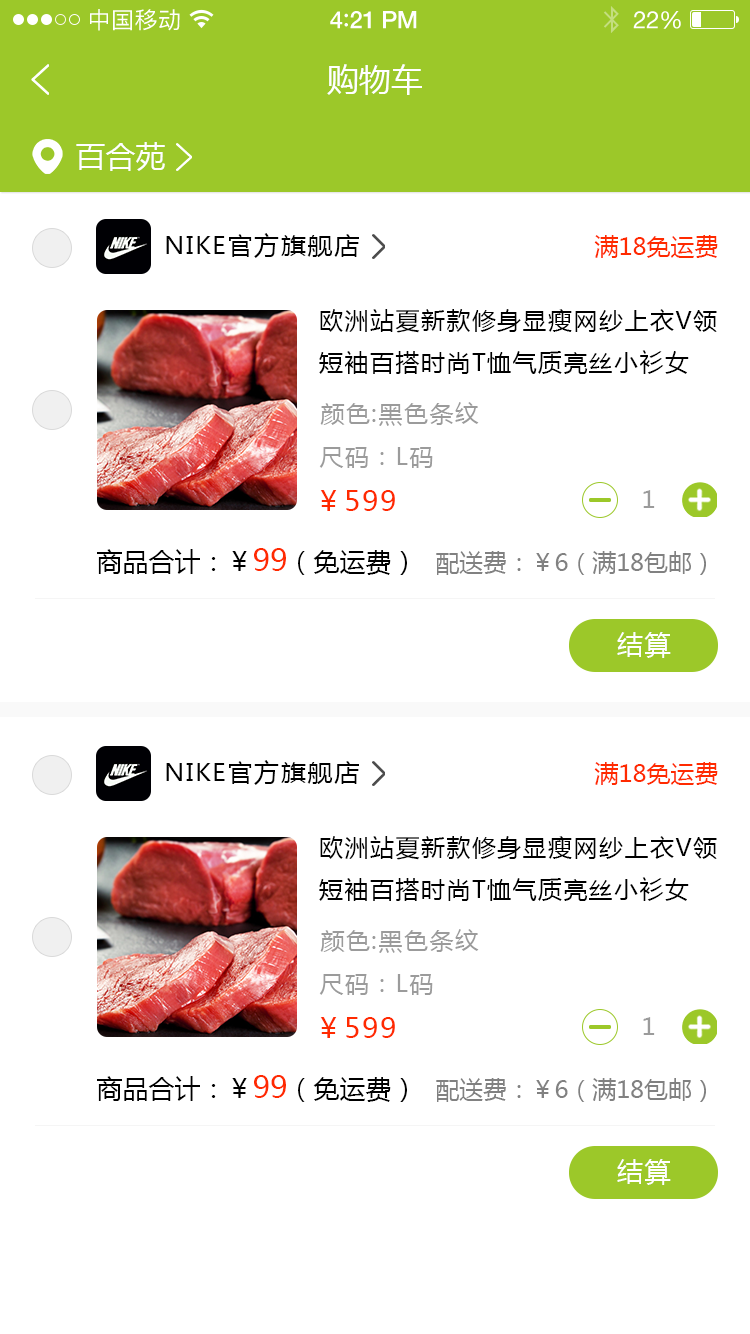
<style>
.page{position:relative;width:750px;height:1334px;background:#ffffff}
.page>*{position:absolute;margin:0}
.t1{font:23px "PingFangSC-Regular";letter-spacing:0.02em;color:#ffffff}
.t2{font:24px "HelveticaNeue-Medium";letter-spacing:-0.02em;color:#ffffff}
.t3{font:26px "Avenir-Medium";letter-spacing:-0.02em;color:#ffffff}
.t4{font:24px "HelveticaNeue";letter-spacing:-0.02em;color:#ffffff}
.t5{font:32px "MicrosoftYaHei";color:#ffffff;text-transform:uppercase}
.t6{font:30px "MicrosoftYaHei";color:#ffffff;text-transform:uppercase}
.t7{font:24px "MicrosoftYaHei";letter-spacing:0.05em;color:#000000;scale:1.06 1}
.t8{font:24px "MicrosoftYaHei";color:#ff2a00;text-transform:uppercase}
.t9{font:24px "MicrosoftYaHei";letter-spacing:0.06em;color:#000000;text-transform:uppercase}
.t10{font:24px "MicrosoftYaHei";letter-spacing:0.06em;color:#9b9b9b;text-transform:uppercase}
.t11{font:28px "MicrosoftYaHei";letter-spacing:0.06em;color:#ff2a00;text-transform:uppercase}
.t12{font:26px "MicrosoftYaHei";color:#000000;text-transform:uppercase}
.t13{font:30px "MicrosoftYaHei";color:#ff2a00;text-transform:uppercase}
.t14{font:23.8px "MicrosoftYaHei";color:#818181;text-transform:uppercase}
.t15{font:26.1px "MicrosoftYaHei";letter-spacing:0.05em;color:#ffffff;text-transform:uppercase}
</style>
<div class="page">
<p class="t1" style="left:90px;top:9px;width:90px;height:22px">中国移动</p>
<p class="t2" style="left:330px;top:11px;width:87px;height:18px">4<span class="t3">:</span>21 PM</p>
<p class="t4" style="left:633px;top:11px;width:48px;height:18px">22%</p>
<p class="t5" style="left:327px;top:64px;width:95px;height:31px">购物车</p>
<p class="t6" style="left:76px;top:142px;width:89px;height:29px">百合苑</p>
<p class="t7" style="left:166px;top:233px;width:193px;height:25px">NIKE官方旗舰店</p>
<p class="t8" style="left:594px;top:235px;width:124px;height:23px">满18免运费</p>
<p class="t9" style="left:319px;top:309px;width:398px;height:65px">欧洲站夏新款修身显瘦网纱上衣v领短袖百搭时尚t恤气质亮丝小衫女</p>
<p class="t10" style="left:320px;top:402px;width:159px;height:24px">颜色:黑色条纹</p>
<p class="t10" style="left:319px;top:447px;width:114px;height:21px">尺码：L码</p>
<p class="t11" style="left:320px;top:490px;width:75px;height:21px">￥599</p>
<p class="t10" style="left:643px;top:490px;width:12px;height:18px">1</p>
<p class="t12" style="left:97px;top:548px;width:310px;height:27px">商品合计：￥<span class="t13">99</span>（免运费）</p>
<p class="t14" style="left:436px;top:551px;width:270px;height:24px">配送费：￥6（满18包邮）</p>
<p class="t15" style="left:617px;top:632px;width:54px;height:26px">结算</p>
<p class="t7" style="left:166px;top:760px;width:193px;height:25px">NIKE官方旗舰店</p>
<p class="t8" style="left:594px;top:762px;width:124px;height:23px">满18免运费</p>
<p class="t9" style="left:319px;top:836px;width:398px;height:65px">欧洲站夏新款修身显瘦网纱上衣v领短袖百搭时尚t恤气质亮丝小衫女</p>
<p class="t10" style="left:320px;top:929px;width:159px;height:24px">颜色:黑色条纹</p>
<p class="t10" style="left:319px;top:974px;width:114px;height:21px">尺码：L码</p>
<p class="t11" style="left:320px;top:1017px;width:75px;height:21px">￥599</p>
<p class="t10" style="left:643px;top:1017px;width:12px;height:18px">1</p>
<p class="t12" style="left:97px;top:1075px;width:310px;height:27px">商品合计：￥<span class="t13">99</span>（免运费）</p>
<p class="t14" style="left:436px;top:1078px;width:270px;height:24px">配送费：￥6（满18包邮）</p>
<p class="t15" style="left:617px;top:1159px;width:54px;height:26px">结算</p>
</div>
